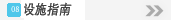
<style>
.page{position:relative;width:171px;height:20px;background:#f4f4f4}
.page>*{position:absolute;margin:0}
.t1{font:14px "New-Gulim";color:#3f3f3f;font-weight:bold;font-style:italic;scale:0.85 1}
</style>
<div class="page">
<p class="t1" style="left:24px;top:2px;width:48px;height:14px">设施指南</p>
</div>
